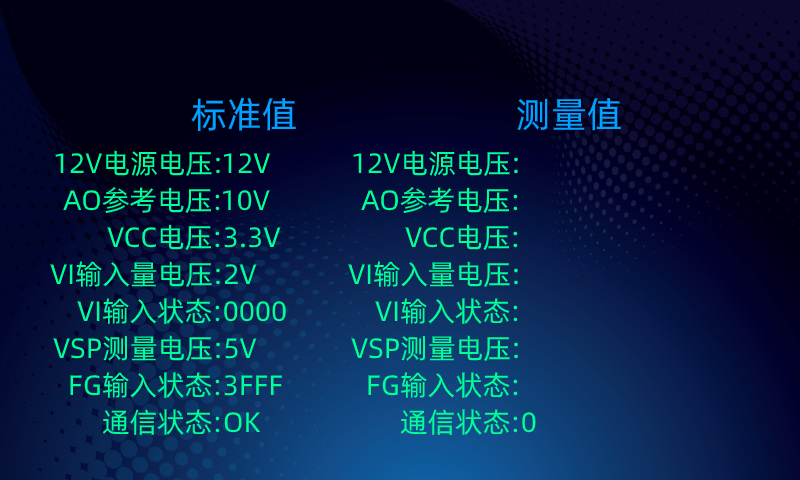
<style>
.page{position:relative;width:800px;height:480px}
.page>*{position:absolute;margin:0}
.t1{font:36px "AlibabaPuHuiTi-Regular";color:#00a1ff}
.t2{font:28px "AlibabaPuHuiTi-Regular";color:#00ff97}
</style>
<div class="page">
<p class="t1" style="left:191px;top:97px;width:105px;height:35px">标准值</p>
<p class="t1" style="left:517px;top:98px;width:104px;height:33px">测量值</p>
<p class="t2" style="left:55px;top:150px;width:216px;height:26px">12V电源电压:12V</p>
<p class="t2" style="left:353px;top:150px;width:165px;height:26px">12V电源电压:</p>
<p class="t2" style="left:63px;top:187px;width:207px;height:26px">AO参考电压:10V</p>
<p class="t2" style="left:361px;top:187px;width:157px;height:26px">AO参考电压:</p>
<p class="t2" style="left:107px;top:224px;width:174px;height:26px">VCC电压:3.3V</p>
<p class="t2" style="left:405px;top:224px;width:113px;height:26px">VCC电压:</p>
<p class="t2" style="left:50px;top:261px;width:207px;height:26px">VI输入量电压:2V</p>
<p class="t2" style="left:348px;top:261px;width:170px;height:26px">VI输入量电压:</p>
<p class="t2" style="left:77px;top:298px;width:209px;height:26px">VI输入状态:0000</p>
<p class="t2" style="left:375px;top:298px;width:143px;height:26px">VI输入状态:</p>
<p class="t2" style="left:53px;top:335px;width:204px;height:26px">VSP测量电压:5V</p>
<p class="t2" style="left:351px;top:335px;width:167px;height:26px">VSP测量电压:</p>
<p class="t2" style="left:70px;top:372px;width:212px;height:26px">FG输入状态:3FFF</p>
<p class="t2" style="left:368px;top:372px;width:150px;height:26px">FG输入状态:</p>
<p class="t2" style="left:102px;top:409px;width:159px;height:26px">通信状态:OK</p>
<p class="t2" style="left:400px;top:409px;width:136px;height:26px">通信状态:0</p>
</div>
